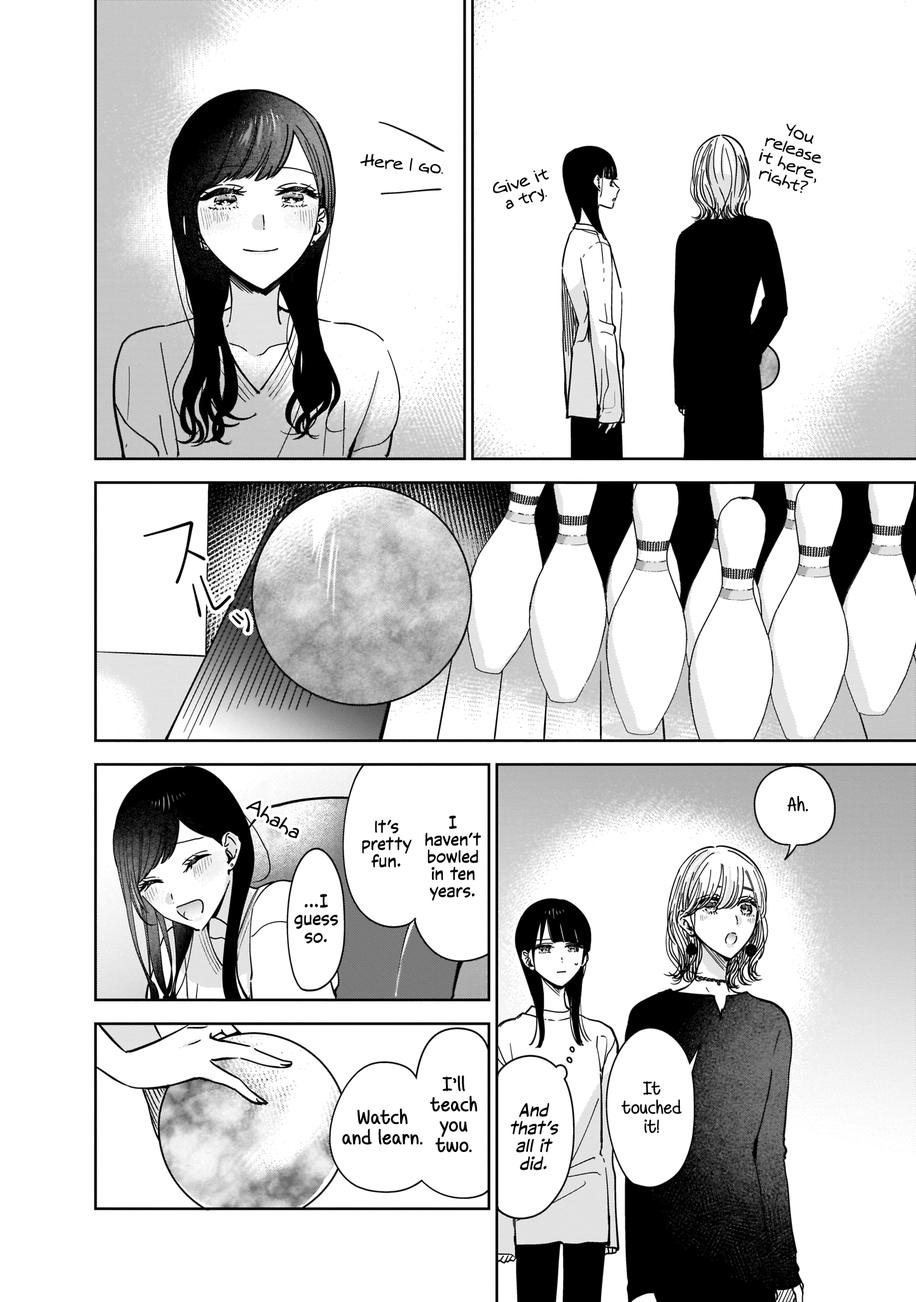
<style>
.page{position:relative;width:916px;height:1302px;background:#ffffff}
.page>*{position:absolute;margin:0}
.t1{font:16.5px "Augie";color:#000000}
.t2{font:20.3px "BordersDivideButHeartsShall";color:#000000}
.t3{font:20.3px "Augie";color:#000000}
.t4{font:17.2px "CCVictorySpeechLower-Regular";color:#000000}
.t5{font:17.8px "CCVictorySpeechLower-Regular";color:#000000}
.t6{font:20.3px "BordersDivideButHeartsShall";color:#000000;font-weight:bold}
.t7{font:19.1px "BordersDivideButHeartsShall";color:#000000}
.t8{font:17.8px "CCVictorySpeechLower-Regular";color:#000000;font-style:italic}
</style>
<div class="page">
<p class="t1" style="left:758px;top:123px;width:63px;height:70px;text-align:center;rotate:19deg">You<br>release<br>it here,<br>right?</p>
<p class="t1" style="left:360px;top:154px;width:83px;height:20px;rotate:6deg">Here I go.</p>
<p class="t1" style="left:493px;top:169px;width:56px;height:40px;text-align:center;rotate:-18deg">Give it<br>a try.</p>
<p class="t2" style="left:787px;top:796px;width:21px;height:15px">Ah.</p>
<p class="t3" style="left:245px;top:801px;width:54px;height:38px;rotate:31deg">Ahaha</p>
<p class="t4" style="left:362px;top:820px;width:49px;height:48px;text-align:center">It’s<br>pretty<br>fun.</p>
<p class="t4" style="left:425px;top:816px;width:56px;height:85px;text-align:center">I<br>haven’t<br>bowled<br>in ten<br>years.</p>
<p class="t5" style="left:294px;top:894px;width:44px;height:50px;text-align:center">...I<br>guess<br>so.</p>
<p class="t6" style="left:430px;top:1075px;width:48px;height:78px;text-align:center">I’ll<br>teach<br>you<br>two.</p>
<p class="t7" style="left:621px;top:1082px;width:61px;height:51px;text-align:center">It<br>touched<br>it!</p>
<p class="t6" style="left:342px;top:1108px;width:80px;height:37px;text-align:center">Watch<br>and learn.</p>
<p class="t8" style="left:510px;top:1103px;width:48px;height:68px;text-align:center">And<br>that’s<br>all it<br>did.</p>
</div>
